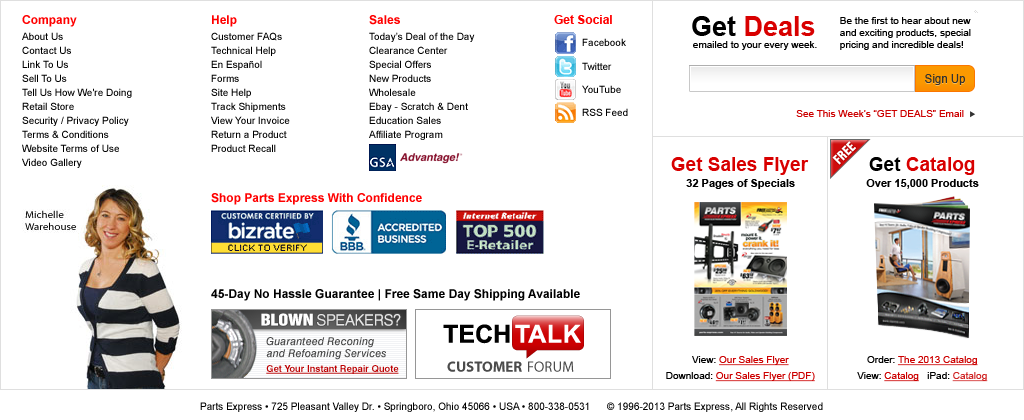
<style>
.page{position:relative;width:1024px;height:420px;background:#ffffff}
.page>*{position:absolute;margin:0}
.t1{font:10px/14px "ArialMT";color:#000000}
.t2{font:12px/12px "Arial-BoldMT";color:#ff0000}
.t3{font:10px/16px "ArialMT";color:#000000}
.t4{font:12px "Arial-BoldMT";color:#ff0000}
.t5{font:27px "Arial-BoldMT";color:#d80000}
.t6{font:27px "Arial-BoldMT";color:#000000}
.t7{font:10px/12px "ArialMT";color:#000000}
.t8{font:10px/24px "ArialMT";color:#000000}
.t9{font:10px/23px "ArialMT";color:#000000}
.t10{font:10px "ArialMT";color:#000000}
.t11{font:11.5px "ArialMT";letter-spacing:0.01em}
.t12{font:11.5px "ArialMT";letter-spacing:0.01em;color:#323232}
.t13{font:10px "ArialMT";color:#cc0000}
.t14{font:12.2px "Swiss921BT-RegularA";letter-spacing:0.02em;color:#ffffff}
.t15{font:19px "Arial-BoldMT";color:#d80000}
.t16{font:19px "Arial-BoldMT";color:#000000}
.t17{font:11px "Arial-BoldMT";color:#000000}
.t18{font:12px "Arial-BoldMT";color:#000000}
.t19{font:10px/16px "ArialMT";color:#cc0000;text-decoration:underline}
.t20{font:10px/16px "ArialMT";color:#d02626;text-decoration:underline}
.t21{font:10.1px "ArialMT";color:#000000}
</style>
<div class="page">
<p class="t1" style="left:22px;top:15px;width:110px;height:153px"><span class="t2">Company<br></span><span class="t3">About Us<br></span>Contact Us<br>Link To Us<br>Sell To Us<br>Tell Us How We're Doing<br>Retail Store<br>Security / Privacy Policy<br>Terms &amp; Conditions<br>Website Terms of Use<br>Video Gallery</p>
<p class="t1" style="left:211px;top:15px;width:79px;height:137px"><span class="t2">Help<br></span><span class="t3">Customer FAQs<br></span>Technical Help<br>En Español<br>Forms<br>Site Help<br>Track Shipments<br>View Your Invoice<br>Return a Product<br>Product Recall</p>
<p class="t1" style="left:369px;top:15px;width:106px;height:125px"><span class="t2">Sales<br></span><span class="t3">Today’s Deal of the Day<br></span>Clearance Center<br>Special Offers<br>New Products<br>Wholesale<br>Ebay - Scratch &amp; Dent<br>Education Sales<br>Affiliate Program</p>
<p class="t4" style="left:554px;top:15px;width:58px;height:9px">Get Social</p>
<p class="t5" style="left:692px;top:16px;width:123px;height:20px"><span class="t6">Get </span>Deals</p>
<p class="t7" style="left:840px;top:17px;width:131px;height:33px">Be the first to hear about new<br>and exciting products, special<br>pricing and incredible deals!</p>
<p class="t8" style="left:582px;top:38px;width:46px;height:78px">Facebook<br>Twitter<br><span class="t9">YouTube<br>RSS Feed</span></p>
<p class="t10" style="left:693px;top:41px;width:124px;height:9px">emailed to your every week.</p>
<p class="t11" style="left:925px;top:75px;width:40px;height:11px">Sign Up</p>
<p class="t12" style="left:925px;top:74px;width:40px;height:11px">Sign Up</p>
<p class="t13" style="left:796px;top:110px;width:168px;height:7px">See This Week’s “GET DEALS” Email</p>
<p class="t14" style="left:832px;top:141px;width:25px;height:24px;rotate:-45deg">FREE</p>
<p class="t15" style="left:671px;top:157px;width:138px;height:18px">Get Sales Flyer</p>
<p class="t15" style="left:869px;top:157px;width:106px;height:18px"><span class="t16">Get </span>Catalog</p>
<p class="t17" style="left:686px;top:179px;width:109px;height:10px">32 Pages of Specials</p>
<p class="t17" style="left:866px;top:179px;width:113px;height:10px">Over 15,000 Products</p>
<p class="t4" style="left:211px;top:193px;width:211px;height:12px">Shop Parts Express With Confidence</p>
<p class="t18" style="left:211px;top:289px;width:369px;height:12px">45-Day No Hassle Guarantee | Free Same Day Shipping Available</p>
<p class="t19" style="left:666px;top:356px;width:149px;height:26px;text-align:center"><span class="t3">View: </span>Our Sales Flyer<br><span class="t3">Download: </span>Our Sales Flyer (PDF)</p>
<p class="t19" style="left:857px;top:356px;width:131px;height:26px;text-align:center"><span class="t3">Order: </span>The 2013 Catalog<br><span class="t3">View: </span>Catalog   <span class="t3">iPad: </span><span class="t20">Catalog</span></p>
<p class="t21" style="left:200px;top:402px;width:623px;height:10px">Parts Express • 725 Pleasant Valley Dr. • Springboro, Ohio 45066 • USA • 800-338-0531      © 1996-2013 Parts Express, All Rights Reserved</p>
</div>
